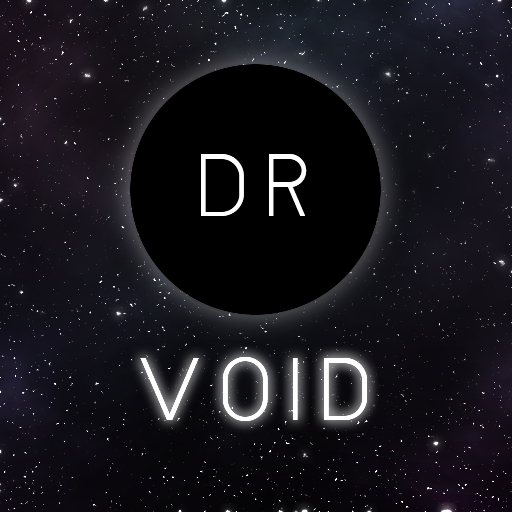
<style>
.page{position:relative;width:512px;height:512px}
.page>*{position:absolute;margin:0}
.t1{font:85px "TimeBurner";color:#ffffff}
</style>
<div class="page">
<p class="t1" style="left:140px;top:154px;width:227px;height:267px;text-align:center">D R<br><br>V O I D</p>
<p class="t1" style="left:140px;top:357px;width:227px;height:64px">V O I D</p>
</div>
